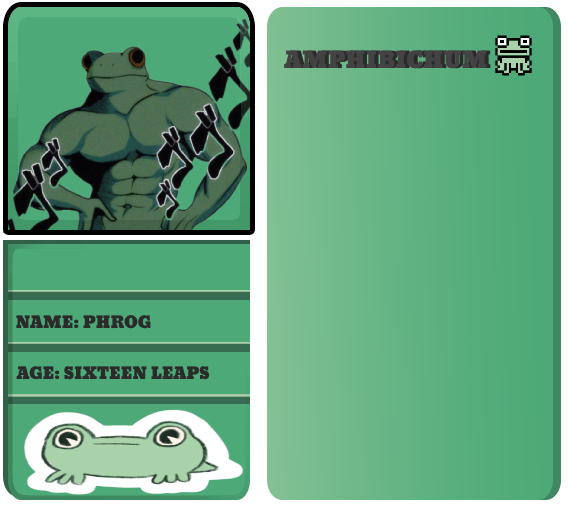
<style>
.page{position:relative;width:569px;height:510px}
.page>*{position:absolute;margin:0}
.t1{font:22px "Bevan";color:#2b2b2b}
.t2{font:16px "Bevan";color:#2b2b2b}
</style>
<div class="page">
<p class="t1" style="left:288px;top:50px;width:203px;height:19px">AMPHIBICHUM</p>
<p class="t2" style="left:16px;top:315px;width:135px;height:14px">NAME: PHROG</p>
<p class="t2" style="left:16px;top:366px;width:194px;height:14px">AGE: SIXTEEN LEAPS</p>
</div>
